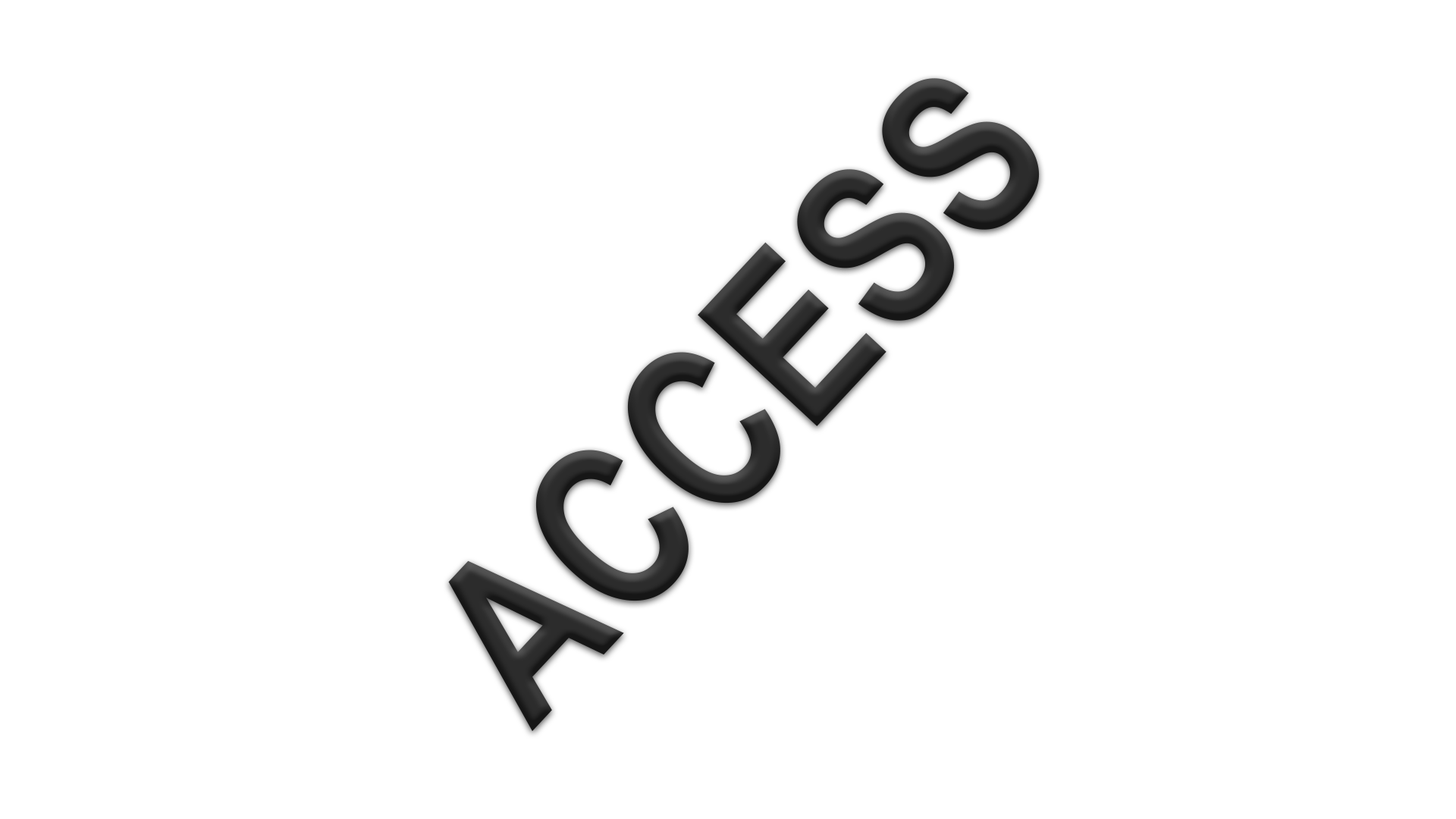
<style>
.page{position:relative;width:1456px;height:819px;background:#ffffff}
.page>*{position:absolute;margin:0}
.t1{font:227.5px "ArialNarrow-Bold";color:#2c2c2c}
</style>
<div class="page">
<p class="t1" style="left:448px;top:78px;width:592px;height:653px;rotate:-47deg">ACCESS</p>
</div>
